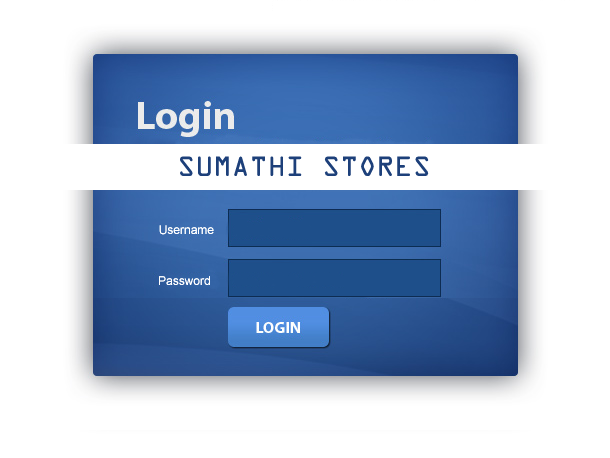
<style>
.page{position:relative;width:610px;height:458px;background:#ffffff}
.page>*{position:absolute;margin:0}
.t1{font:30px "OCRAExtended";color:#1d407a}
.t2{font:12px "ArialMT";color:#ffffff}
</style>
<div class="page">
<p class="t1" style="left:180px;top:156px;width:249px;height:20px">SUMATHI STORES</p>
<p class="t2" style="left:159px;top:225px;width:55px;height:10px">Username</p>
<p class="t2" style="left:159px;top:276px;width:51px;height:9px">Password</p>
</div>
